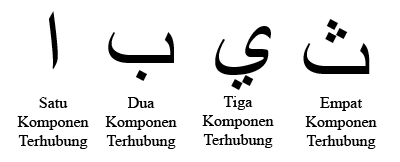
<style>
.page{position:relative;width:400px;height:162px;background:#ffffff}
.page>*{position:absolute;margin:0}
.t1{font:16px "TimesNewRomanPSMT";color:#000000}
</style>
<div class="page">
<p class="t1" style="left:17px;top:97px;width:72px;height:52px;text-align:center">Satu<br>Komponen<br>Terhubung</p>
<p class="t1" style="left:105px;top:97px;width:72px;height:52px;text-align:center">Dua<br>Komponen<br>Terhubung</p>
<p class="t1" style="left:202px;top:96px;width:72px;height:52px;text-align:center">Tiga<br>Komponen<br>Terhubung</p>
<p class="t1" style="left:305px;top:97px;width:72px;height:52px;text-align:center">Empat<br>Komponen<br>Terhubung</p>
</div>
